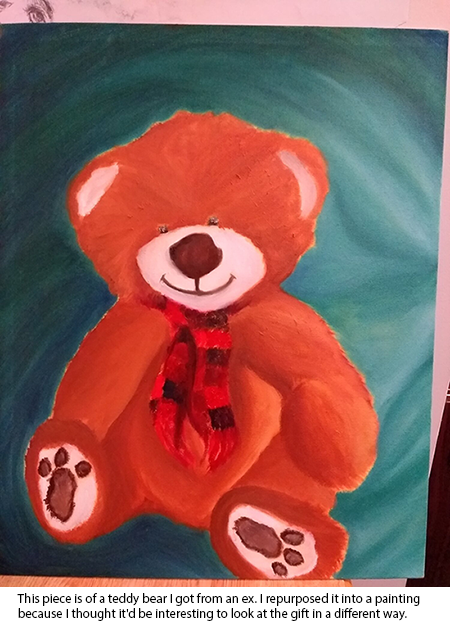
<style>
.page{position:relative;width:450px;height:630px}
.page>*{position:absolute;margin:0}
.t1{font:13px "MyriadPro-Regular";color:#000000}
</style>
<div class="page">
<p class="t1" style="left:17px;top:593px;width:403px;height:28px">This piece is of a teddy bear I got from an ex. I repurposed it into a painting because I thought it'd be interesting to look at the gift in a different way.</p>
</div>
